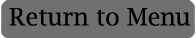
<style>
.page{position:relative;width:196px;height:38px;background:#707070}
.page>*{position:absolute;margin:0}
.t1{font:24px "LucidaBright";color:#000000}
</style>
<div class="page">
<p class="t1" style="left:9px;top:8px;width:182px;height:18px">Return to Menu</p>
</div>
